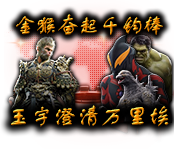
<style>
.page{position:relative;width:174px;height:165px}
.page>*{position:absolute;margin:0}
.t1{font:21.5px "FZSTK--GBK1-0"}
.t2{font:23.6px "FZSTK--GBK1-0"}
</style>
<div class="page">
<p class="t1" style="left:16px;top:14px;width:147px;height:21px">金猴奋起千钧棒</p>
<p class="t2" style="left:11px;top:105px;width:158px;height:22px">玉宇澄清万里埃</p>
</div>
